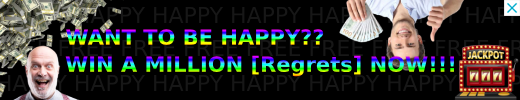
<style>
.page{position:relative;width:520px;height:100px;background:#000000}
.page>*{position:absolute;margin:0}
.t1{font:21px "MontserratRoman-ExtraBold"}
</style>
<div class="page">
<p class="t1" style="left:66px;top:29px;width:258px;height:17px">WANT TO BE HAPPY??</p>
<p class="t1" style="left:65px;top:55px;width:389px;height:22px">WIN A MILLION [Regrets] NOW!!!</p>
</div>
